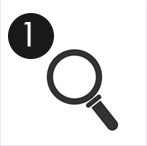
<style>
.page{position:relative;width:147px;height:146px;background:#ffffff}
.page>*{position:absolute;margin:0}
.t1{font:33px "CenturyGothic";color:#ffffff;font-weight:bold;scale:0.91 1}
</style>
<div class="page">
<p class="t1" style="left:24px;top:22px;width:7px;height:25px">1</p>
</div>
